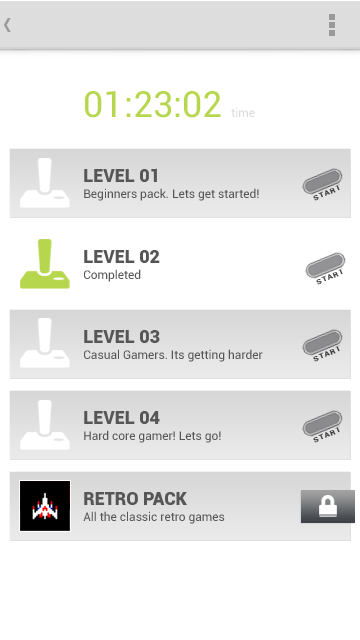
<style>
.page{position:relative;width:360px;height:640px;background:#ffffff}
.page>*{position:absolute;margin:0}
.t1{font:36px "Roboto-Regular";color:#b6d74d}
.t2{font:12px "Roboto-Regular";color:#d9d9d9}
.t3{font:18px "Roboto-Black";color:#565656}
.t4{font:7.1px "Roboto-Black";letter-spacing:0.12em;color:#3f3f3f;scale:1.19 1}
.t5{font:12px "Roboto-Regular";color:#565656}
.t6{font:7.1px "Roboto-Black";letter-spacing:0.12em;color:#474747;scale:1.19 1}
</style>
<div class="page">
<p class="t1" style="left:85px;top:91px;width:170px;height:27px">01:23:02 <span class="t2">time</span></p>
<p class="t3" style="left:84px;top:168px;width:73px;height:14px">LEVEL 01</p>
<p class="t4" style="left:313px;top:184px;width:27px;height:17px;rotate:-23deg">START</p>
<p class="t5" style="left:84px;top:188px;width:175px;height:13px">Beginners pack. Lets get started!</p>
<p class="t3" style="left:84px;top:250px;width:76px;height:13px">LEVEL 02</p>
<p class="t5" style="left:84px;top:269px;width:57px;height:13px">Completed</p>
<p class="t6" style="left:316px;top:268px;width:27px;height:17px;rotate:-23deg">START</p>
<p class="t3" style="left:84px;top:330px;width:76px;height:13px">LEVEL 03</p>
<p class="t5" style="left:84px;top:349px;width:179px;height:13px">Casual Gamers. Its getting harder</p>
<p class="t4" style="left:313px;top:345px;width:27px;height:17px;rotate:-23deg">START</p>
<p class="t3" style="left:84px;top:411px;width:76px;height:13px">LEVEL 04</p>
<p class="t5" style="left:84px;top:430px;width:137px;height:13px">Hard core gamer! Lets go!</p>
<p class="t4" style="left:313px;top:426px;width:27px;height:17px;rotate:-23deg">START</p>
<p class="t3" style="left:84px;top:492px;width:103px;height:13px">RETRO PACK</p>
<p class="t5" style="left:83px;top:511px;width:142px;height:13px">All the classic retro games</p>
</div>
